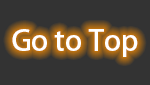
<style>
.page{position:relative;width:150px;height:85px;background:#333333}
.page>*{position:absolute;margin:0}
.t1{font:28.8px "AdobeFanHeitiStd-Bold";color:#ffffff}
</style>
<div class="page">
<p class="t1" style="left:12px;top:29px;width:126px;height:28px">Go to Top</p>
</div>
